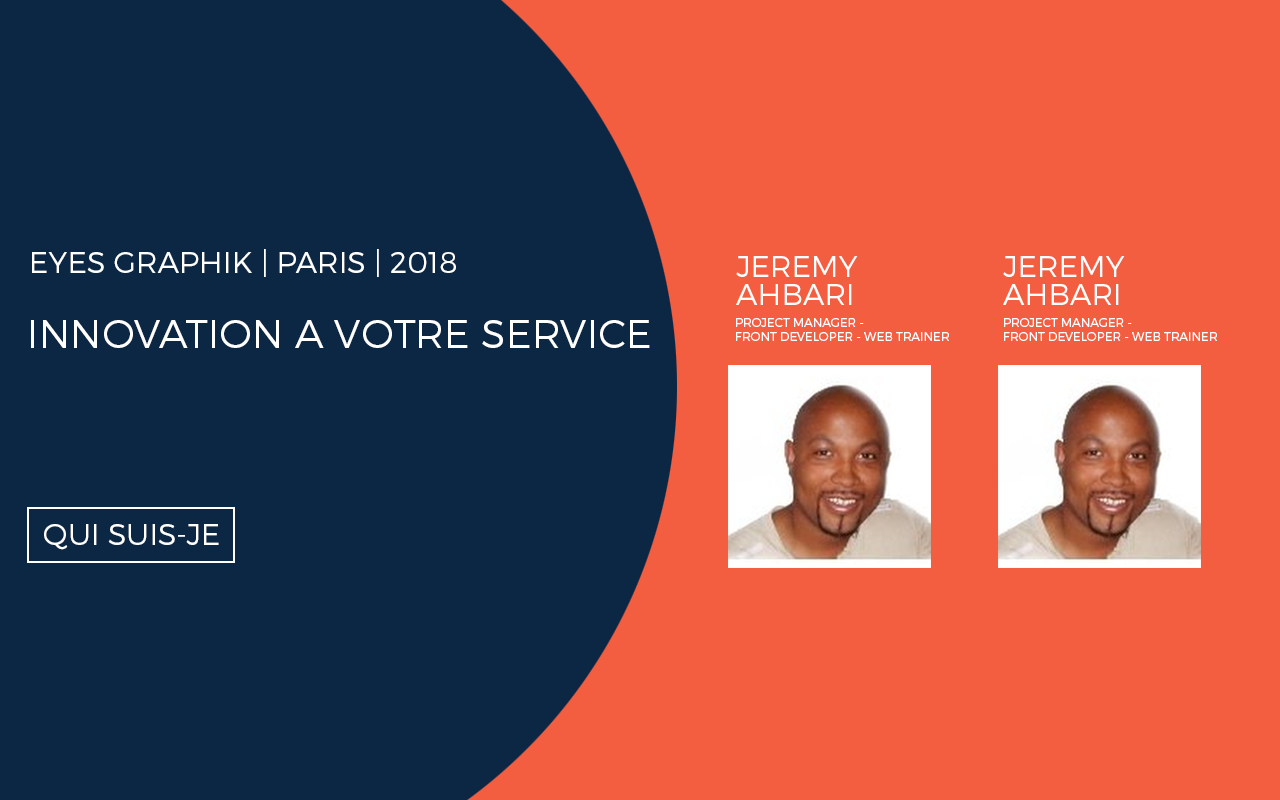
<style>
.page{position:relative;width:1280px;height:800px;background:#0c2744}
.page>*{position:absolute;margin:0}
.t1{font:30px "Montserrat-Light";color:#ffffff;text-transform:uppercase}
.t2{font:30px/28px "Montserrat-Light";color:#ffffff;text-transform:uppercase}
.t3{font:12px "Montserrat-Light";color:#ffffff;text-transform:uppercase}
.t4{font:40px "Montserrat-Light";color:#ffffff;text-transform:uppercase}
</style>
<div class="page">
<p class="t1" style="left:32px;top:249px;width:424px;height:28px">eyes graphik | paris | 2018</p>
<p class="t2" style="left:736px;top:256px;width:122px;height:49px">JEREMY<br>AHBARI</p>
<p class="t2" style="left:1003px;top:256px;width:122px;height:49px">JEREMY<br>AHBARI</p>
<p class="t3" style="left:736px;top:318px;width:213px;height:23px">Project Manager - <br>front developer - web trainer</p>
<p class="t3" style="left:1004px;top:318px;width:213px;height:23px">Project Manager - <br>front developer - web trainer</p>
<p class="t4" style="left:31px;top:320px;width:619px;height:28px">innovation a votre service</p>
<p class="t1" style="left:44px;top:524px;width:175px;height:26px">Qui suis-je</p>
</div>
